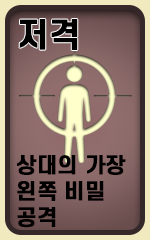
<style>
.page{position:relative;width:150px;height:240px}
.page>*{position:absolute;margin:0}
.t1{font:32.7px "S-CoreDream-6Bold";color:#000000;font-weight:bold}
.t2{font:21.1px/25.9px "S-CoreDream-6Bold";color:#000000;font-weight:bold}
</style>
<div class="page">
<p class="t1" style="left:19px;top:19px;width:59px;height:31px">저격</p>
<p class="t2" style="left:17px;top:155px;width:109px;height:73px">상대의 가장<br>왼쪽 비밀<br>공격</p>
</div>
